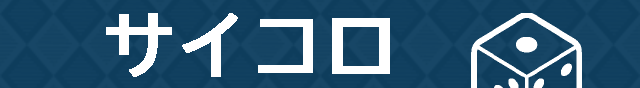
<style>
.page{position:relative;width:640px;height:88px}
.page>*{position:absolute;margin:0}
.t1{font:72px "BIZ-UDGothic-Bold";color:#ffffff;font-weight:bold}
</style>
<div class="page">
<p class="t1" style="left:106px;top:13px;width:284px;height:64px">サイコロ</p>
</div>
